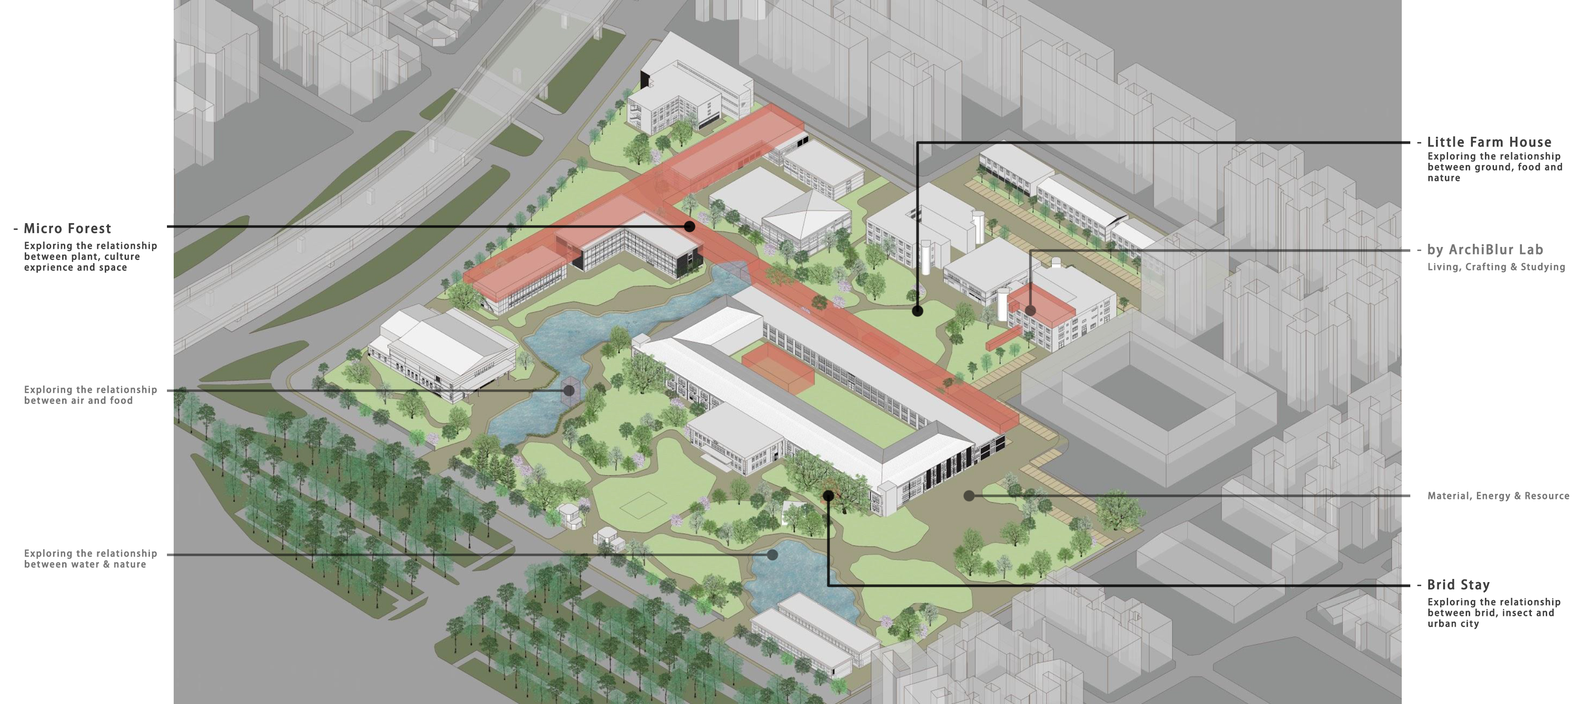
<style>
.page{position:relative;width:1575px;height:704px;background:#ffffff}
.page>*{position:absolute;margin:0}
.t1{font:12.6px "AdobeHeitiStd-Regular";letter-spacing:0.1em;color:#404040;font-weight:bold}
.t2{font:9px "AdobeHeitiStd-Regular";letter-spacing:0.1em;color:#404040;font-weight:bold}
.t3{font:12.6px "AdobeHeitiStd-Regular";letter-spacing:0.1em;color:#777777;font-weight:bold}
.t4{font:9px "AdobeHeitiStd-Regular";letter-spacing:0.1em;color:#777777;font-weight:bold}
</style>
<div class="page">
<p class="t1" style="left:1417px;top:136px;width:134px;height:11px">- Little Farm House</p>
<p class="t2" style="left:1428px;top:152px;width:134px;height:29px">Exploring the relationship between ground, food and nature</p>
<p class="t1" style="left:14px;top:223px;width:97px;height:11px">- Micro Forest</p>
<p class="t2" style="left:24px;top:242px;width:133px;height:31px">Exploring the relationship between plant, culture    exprience and space</p>
<p class="t3" style="left:1417px;top:244px;width:126px;height:14px">- by ArchiBlur Lab</p>
<p class="t4" style="left:1428px;top:262px;width:137px;height:11px">Living, Crafting &amp; Studying</p>
<p class="t4" style="left:25px;top:386px;width:132px;height:18px">Exploring the relationship between air and food</p>
<p class="t4" style="left:1428px;top:492px;width:142px;height:10px">Material, Energy &amp; Resource</p>
<p class="t4" style="left:25px;top:549px;width:132px;height:19px">Exploring the relationship between water &amp; nature</p>
<p class="t1" style="left:1417px;top:579px;width:73px;height:14px">- Brid Stay</p>
<p class="t2" style="left:1428px;top:598px;width:133px;height:32px">Exploring the relationship between brid, insect and urban city</p>
</div>
